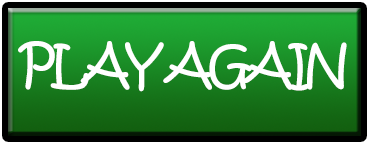
<style>
.page{position:relative;width:369px;height:142px}
.page>*{position:absolute;margin:0}
.t1{font:90px "KristenITC-Regular";letter-spacing:-0.1em;color:#ffffff}
.t2{font:20px "KristenITC-Regular";letter-spacing:-0.1em;color:#ffffff}
</style>
<div class="page">
<p class="t1" style="left:18px;top:41px;width:329px;height:51px"><span class="t2"><br><br><br><br><br><br><br><br><br><br><br><br><br><br><br><br></span><br><br>PLAY AGAIN</p>
</div>
